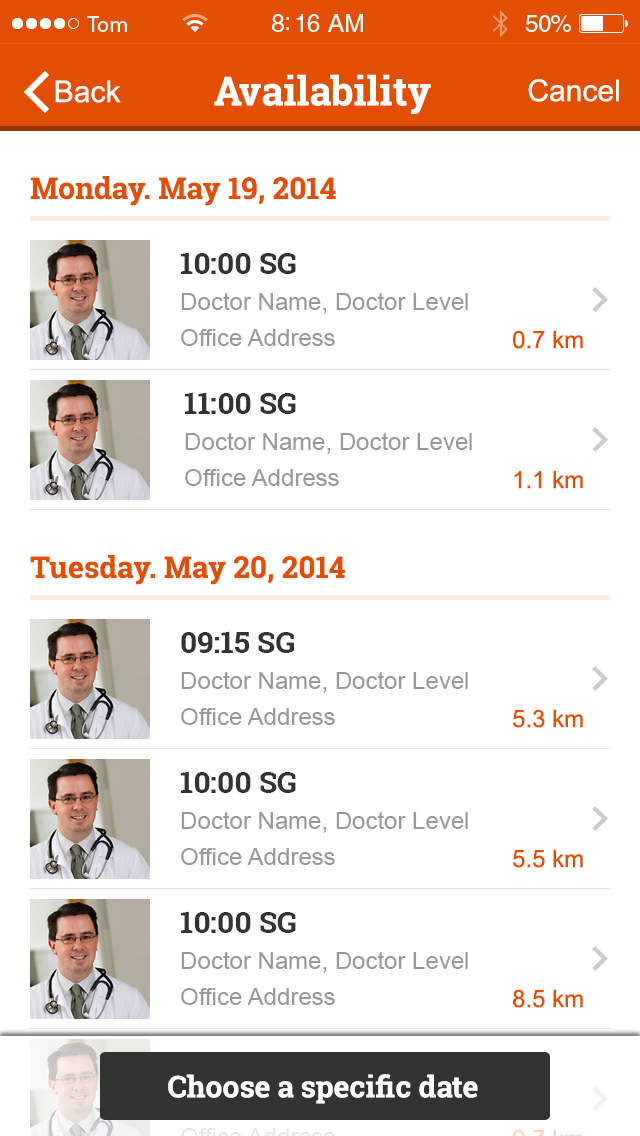
<style>
.page{position:relative;width:640px;height:1136px;background:#ffffff}
.page>*{position:absolute;margin:0}
.t1{font:23px "MyriadPro-Regular";letter-spacing:-0.02em;color:#ffffff}
.t2{font:25px "HelveticaLTStd-Roman";letter-spacing:-0.02em;color:#ffffff}
.t3{font:24px "HelveticaLTStd-Roman";letter-spacing:-0.02em;color:#ffffff}
.t4{font:40px "RobotoSlab-Bold";color:#ffffff}
.t5{font:30px "ArialMT";color:#ffffff}
.t6{font:30px "RobotoSlab-Bold";color:#e24f02}
.t7{font:24px/36px "ArialMT";color:#999999}
.t8{font:30px/36px "RobotoSlab-Bold";color:#333333}
.t9{font:24px "ArialMT";color:#e24f02}
.t10{font:30px "RobotoSlab-Bold";color:#ffffff}
</style>
<div class="page">
<p class="t1" style="left:87px;top:16px;width:40px;height:16px">Tom</p>
<p class="t2" style="left:272px;top:14px;width:91px;height:18px">8:16 AM</p>
<p class="t3" style="left:525px;top:15px;width:46px;height:17px">50%</p>
<p class="t4" style="left:214px;top:74px;width:217px;height:40px">Availability</p>
<p class="t5" style="left:55px;top:80px;width:66px;height:23px">Back</p>
<p class="t5" style="left:528px;top:79px;width:91px;height:23px">Cancel</p>
<p class="t6" style="left:30px;top:176px;width:306px;height:30px">Monday. May 19, 2014</p>
<p class="t7" style="left:180px;top:252px;width:288px;height:94px"><span class="t8">10:00 SG<br></span>Doctor Name, Doctor Level<br>Office Address</p>
<p class="t9" style="left:513px;top:330px;width:70px;height:19px">0.7 km</p>
<p class="t7" style="left:184px;top:392px;width:288px;height:94px"><span class="t8">11:00 SG<br></span>Doctor Name, Doctor Level<br>Office Address</p>
<p class="t9" style="left:514px;top:470px;width:69px;height:19px">1.1 km</p>
<p class="t6" style="left:30px;top:555px;width:315px;height:30px">Tuesday. May 20, 2014</p>
<p class="t7" style="left:181px;top:631px;width:287px;height:94px"><span class="t8">09:15 SG<br></span>Doctor Name, Doctor Level<br>Office Address</p>
<p class="t9" style="left:513px;top:709px;width:70px;height:19px">5.3 km</p>
<p class="t7" style="left:180px;top:771px;width:288px;height:94px"><span class="t8">10:00 SG<br></span>Doctor Name, Doctor Level<br>Office Address</p>
<p class="t9" style="left:513px;top:849px;width:70px;height:19px">5.5 km</p>
<p class="t7" style="left:180px;top:911px;width:288px;height:94px"><span class="t8">10:00 SG<br></span>Doctor Name, Doctor Level<br>Office Address</p>
<p class="t9" style="left:513px;top:989px;width:70px;height:19px">8.5 km</p>
<p class="t10" style="left:168px;top:1074px;width:310px;height:30px">Choose a specific date</p>
</div>
